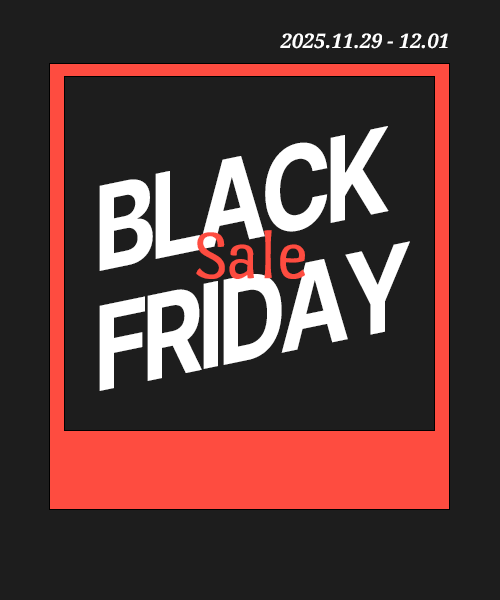
<style>
.page{position:relative;width:500px;height:600px;background:#1d1d1d}
.page>*{position:absolute;margin:0}
.t1{font:20px "NotoSerif-BoldItalic";color:#ffffff}
.t2{font:120px/120px "Pretendard-Bold";letter-spacing:-0.06em;color:#ffffff;scale:0.83 1}
.t3{font:70px "PortLligatSans-Regular";color:#fe4c40}
</style>
<div class="page">
<p class="t1" style="left:280px;top:33px;width:168px;height:16px">2025.11.29 - 12.01</p>
<p class="t2" style="left:99px;top:126px;width:311px;height:265px;rotate:-12deg">BLACK<br>FRIDAY</p>
<p class="t3" style="left:196px;top:230px;width:109px;height:49px">Sale</p>
</div>
